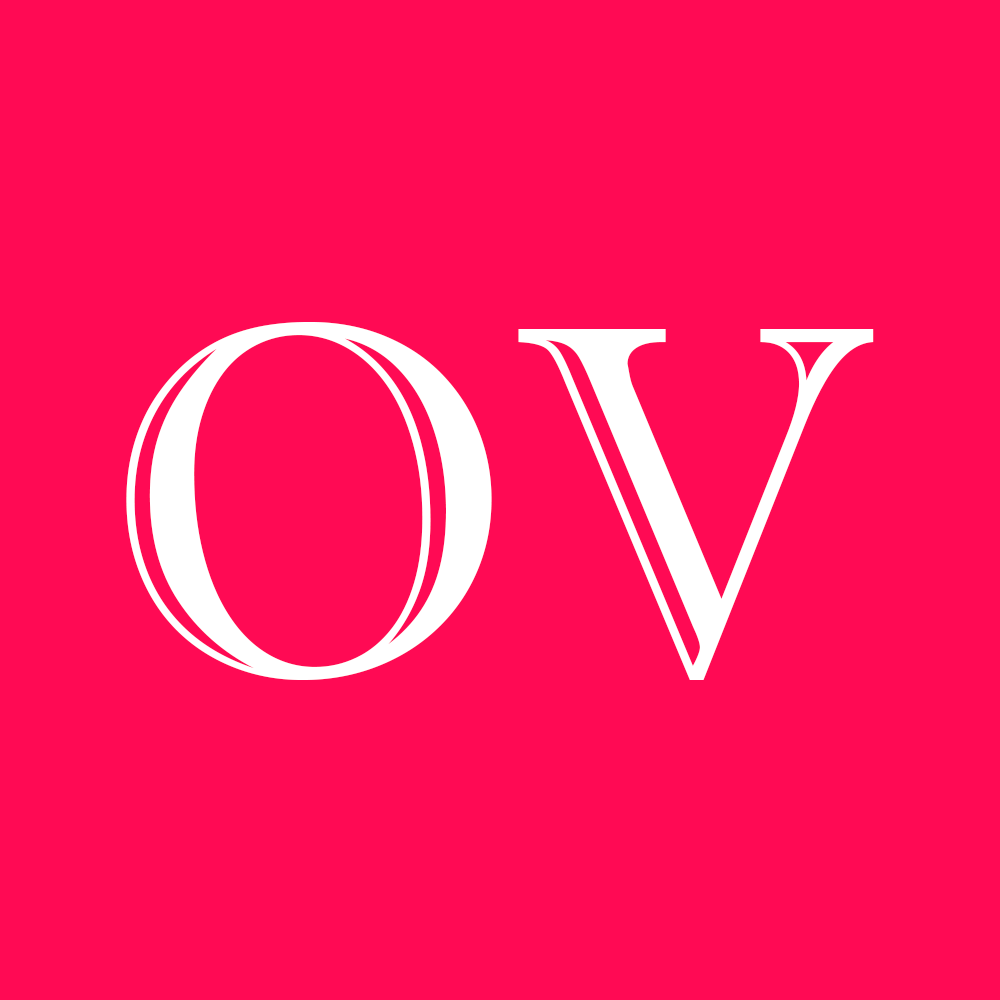
<style>
.page{position:relative;width:1000px;height:1000px;background:#ff0a54}
.page>*{position:absolute;margin:0}
.t1{font:500px "ImprintMT-Shadow";color:#ffffff}
</style>
<div class="page">
<p class="t1" style="left:126px;top:322px;width:748px;height:358px">OV</p>
</div>
